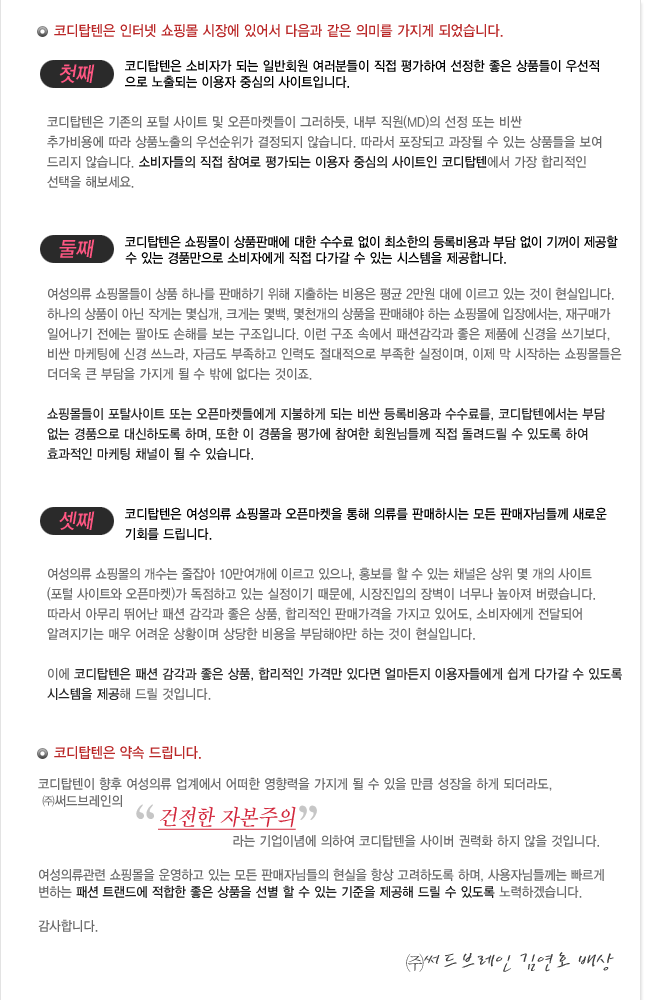
<style>
.page{position:relative;width:645px;height:1000px;background:#ffffff}
.page>*{position:absolute;margin:0}
.t1{font:14.7px "YDIYGO330";color:#ba2828;scale:0.9 1}
.t2{font:13.7px/20px "YDIYGO330";color:#6a6a6a;scale:0.9 1}
.t3{font:13.7px/20px "YDIYGO330";color:#ff5682;font-style:italic;scale:0.9 1}
.t4{font:13.7px/16px "YDIYGO330";color:#000000;scale:0.9 1}
.t5{font:13.7px/20px "YDIYGO330";color:#141414;scale:0.9 1}
.t6{font:13.7px/16px "YDIYGO330";letter-spacing:-0.015em;color:#000000;scale:0.9 1}
.t7{font:13.7px/20px "YDIYGO330";letter-spacing:-0.02em;color:#6a6a6a;scale:0.9 1}
.t8{font:13.7px/20px "YDIYGO330";color:#252525;scale:0.9 1}
.t9{font:13.7px/20px "YDIYGO330";color:#000000;scale:0.9 1}
.t10{font:21px "YDIYGO330";color:#ff5682;font-style:italic;scale:0.9 1}
.t11{font:13.7px/17px "YDIYGO330";color:#6a6a6a;scale:0.9 1}
.t12{font:13.7px/17px "YDIYGO330";letter-spacing:-0.01em;color:#6a6a6a;scale:0.9 1}
.t13{font:13.7px/17px "YDIYGO330";letter-spacing:-0.01em;color:#1c1c1c;scale:0.9 1}
.t14{font:13.7px/17px "YDIYGO330";color:#1c1c1c;scale:0.9 1}
.t15{font:70px "SandTm";letter-spacing:-0.02em;color:#c6c6c6}
.t16{font:23.1px "SandTm";color:#d2283c;font-style:italic;text-decoration:underline;scale:0.9 1}
.t17{font:23.1px "SanBsB";color:#3e3e3e;scale:0.9 1}
</style>
<div class="page">
<p class="t1" style="left:54px;top:24px;width:449px;height:14px">코디탑텐은 인터넷 쇼핑몰 시장에 있어서 다음과 같은 의미를 가지게 되었습니다.</p>
<p class="t2" style="left:47px;top:59px;width:575px;height:641px"><span class="t3">                  </span><span class="t4">코디탑텐은 소비자가 되는 일반회원 여러분들이 직접 평가하여 선정한 좋은 상품들이 우선적<br>                  으로 노출되는 이용자 중심의 사이트입니다.<br><br></span>코디탑텐은 기존의 포털 사이트 및 오픈마켓들이 그러하듯, 내부 직원(MD)의 선정 또는 비싼 <br>추가비용에 따라 상품노출의 우선순위가 결정되지 않습니다. 따라서 포장되고 과장될 수 있는 상품들을 보여<br>드리지 않습니다. <span class="t5">소비자들의 직접 참여로 평가되는 이용자 중심의 사이트인 코디탑텐</span>에서 가장 합리적인 <br>선택을 해보세요.<br><br><br>                  <span class="t6">코디탑텐은 쇼핑몰이 상품판매에 대한 수수료 없이 최소한의 등록비용과 부담 없이 기꺼이 제공할 <br>                   수 있는 경품만으로 </span><span class="t4">소비자에게 직접 다가갈 수 있는 시스템을 제공합니다.<br><br></span><span class="t7">여성의류 쇼핑몰들이 상품 하나를 판매하기 위해 지출하는 비용은 평균 2만원 대에 이르고 있는 것이 현실입니다. <br>하나의 상품이 아닌 작게는 몇십개, 크게는 몇백, 몇천개의 상품을 판매해야 하는 쇼핑몰에 입장에서는, 재구매가 <br></span>일어나기 전에는 팔아도 손해를 보는 구조입니다. 이런 구조 속에서 패션감각과 좋은 제품에 신경을 쓰기보다,<br>비싼 마케팅에 신경 쓰느라, 자금도 부족하고 인력도 절대적으로 부족한 실정이며, 이제 막 시작하는 쇼핑몰들은 <br>더더욱 큰 부담을 가지게 될 수 밖에 없다는 것이죠.<br><br><span class="t8">쇼핑몰들이 포탈사이트 또는 오픈마켓들에게 지불하게 되는 비싼 등록비용과 수수료를, 코디탑텐에서는 부담 <br>없는 경품으로 대신하도록 하며, 또한 이 경품을 평가에 참여한 회원님들께 직접 돌려드릴 수 있도록 하여 <br>효과적인 마케팅 채널이 될 수 있습니다.<br><br><br>                  </span><span class="t9">코디탑텐은 여성의류 쇼핑몰과 오픈마켓을 통해 의류를 판매하시는 모든 판매자님들께 새로운 <br>                  기회를 드립니다.<br><br></span><span class="t7">여성의류 쇼핑몰의 개수는 줄잡아 10만여개에 이르고 있으나, 홍보를 할 수 있는 채널은 상위 몇 개의 사이트<br>(포털 사이트와</span> 오픈마켓)가 독점하고 있는 실정이기 때문에, 시장진입의 장벽이 너무나 높아져 버렸습니다. <br>따라서 아무리 뛰어난 패션 감각과 좋은 상품, 합리적인 판매가격을 가지고 있어도, 소비자에게 전달되어 <br>알려지기는 매우 어려운 상황이며 상당한 비용을 부담해야만 하는 것이 현실입니다.<br><br>이에 <span class="t8">코디탑텐은 패션 감각과 좋은 상품, 합리적인 가격만 있다면 얼마든지 이용자들에게 쉽게 다가갈 수 있도록 <br>시스템을 제공</span>해 드릴 것입니다.</p>
<p class="t10" style="left:59px;top:64px;width:36px;height:19px">첫째</p>
<p class="t10" style="left:59px;top:239px;width:36px;height:19px">둘째</p>
<p class="t10" style="left:59px;top:511px;width:36px;height:19px">셋째</p>
<p class="t1" style="left:54px;top:746px;width:147px;height:13px">코디탑텐은 약속 드립니다.</p>
<p class="t11" style="left:38px;top:777px;width:566px;height:155px">코디탑텐이 향후 여성의류 업계에서 어떠한 영향력을 가지게 될 수 있을 만큼 성장을 하게 되더라도,<br> ㈜써드브레인의 <br><span class="t2">                     <br>                                             라는 기업이념에 의하여 코디탑텐을 사이버 권력화 하지 않을 것입니다.<br><br></span><span class="t12">여성의류관련 쇼핑몰을 운영하고 있는 모든 판매자님들의 현실을 항상 고려하도록 하며, 사용자님들께는 빠르게 <br>변하는 </span><span class="t13">패션 트랜드에</span><span class="t14"> 적합한 좋은 상품을 선별 할 수 있는 기준을 제공해 드릴 수 있도록</span> 노력하겠습니다. <br><br>감사합니다.</p>
<p class="t15" style="left:136px;top:804px;width:181px;height:16px">“        ”</p>
<p class="t16" style="left:158px;top:806px;width:138px;height:24px">건전한 자본주의</p>
<p class="t17" style="left:406px;top:952px;width:208px;height:20px">㈜써드브레인 김연호 배상</p>
</div>
